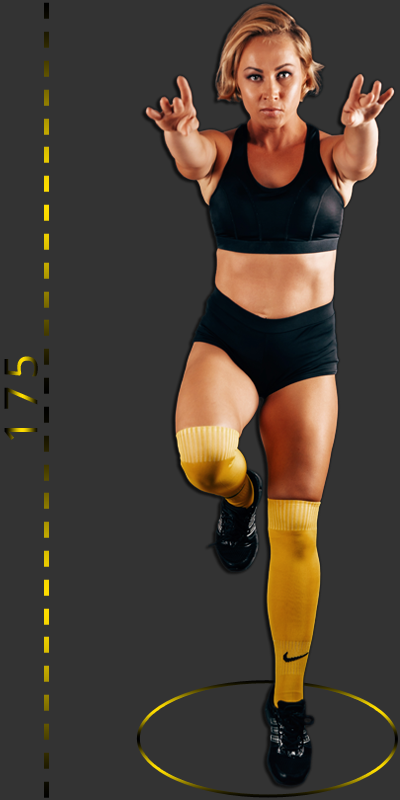
<style>
.page{position:relative;width:400px;height:800px;background:#333333}
.page>*{position:absolute;margin:0}
.t1{font:61px "Tahoma";letter-spacing:0.11em}
.t2{font:45.7px "NotoMono";letter-spacing:0.11em}
</style>
<div class="page">
<p class="t1" style="left:44px;top:2px;width:5px;height:796px;rotate:90deg">----------------------------</p>
<p class="t2" style="left:4px;top:356px;width:34px;height:84px;rotate:-90deg">175</p>
</div>
